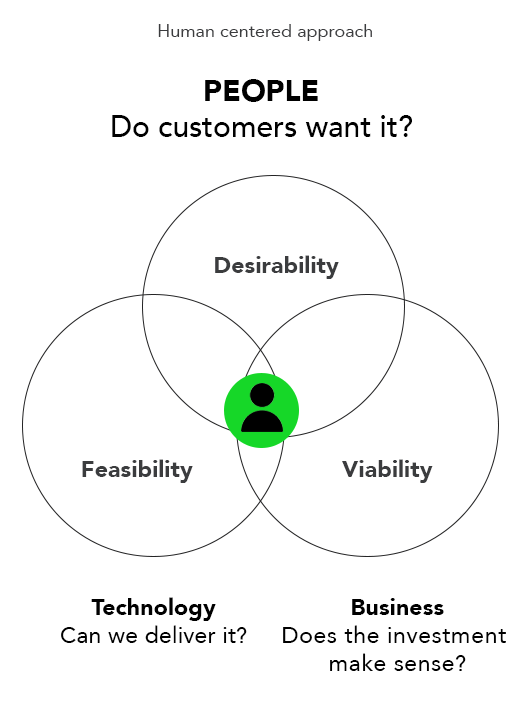
<style>
.page{position:relative;width:522px;height:703px;background:#ffffff}
.page>*{position:absolute;margin:0}
.t1{font:18px "Avenir-Roman";color:#3b3c3e}
.t2{font:29.8px "Avenir-Medium";color:#000000}
.t3{font:29.8px "Avenir-Black";color:#000000}
.t4{font:23.3px "Avenir-Black";color:#3b3c3e}
.t5{font:23.3px "Avenir-Roman";color:#000000}
.t6{font:23.3px "Avenir-Black";color:#000000}
.t7{font:23.3px "Avenir-Roman";letter-spacing:0.02em;color:#000000}
</style>
<div class="page">
<p class="t1" style="left:158px;top:24px;width:214px;height:17px">Human centered approach</p>
<p class="t2" style="left:112px;top:79px;width:300px;height:58px;text-align:center"><span class="t3">PEOPLE<br></span>Do customers want it?</p>
<p class="t4" style="left:215px;top:255px;width:124px;height:24px">Desirability</p>
<p class="t4" style="left:82px;top:459px;width:111px;height:24px">Feasibility</p>
<p class="t4" style="left:342px;top:459px;width:91px;height:24px">Viability</p>
<p class="t5" style="left:61px;top:597px;width:186px;height:46px;text-align:center"><span class="t6">Technology<br></span>Can we deliver it?</p>
<p class="t7" style="left:283px;top:598px;width:223px;height:73px;text-align:center"><span class="t6">Business<br></span>Does the investment <br>make sense?</p>
</div>
